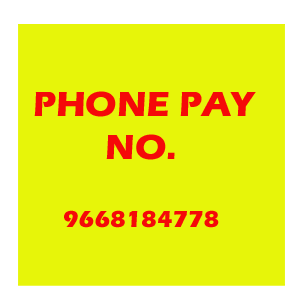
<style>
.page{position:relative;width:300px;height:300px;background:#e7f509}
.page>*{position:absolute;margin:0}
.t1{font:36px "ErasITC-Bold";color:#f50909}
.t2{font:24px "ErasITC-Bold";color:#f50909}
</style>
<div class="page">
<p class="t1" style="left:34px;top:91px;width:222px;height:69px">PHONE PAY<br>        NO.</p>
<p class="t2" style="left:64px;top:210px;width:155px;height:18px">9668184778</p>
</div>
